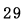
<style>
.page{position:relative;width:25px;height:25px;background:#ffffff}
.page>*{position:absolute;margin:0}
.t1{font:16px "NSimSun";letter-spacing:0.08em;color:#000000;font-weight:bold}
</style>
<div class="page">
<p class="t1" style="left:3px;top:7px;width:18px;height:12px">29</p>
</div>
